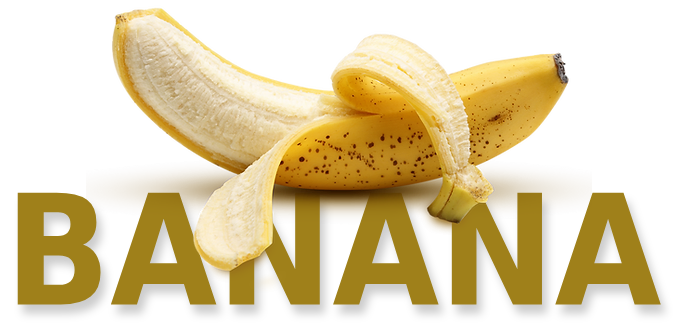
<style>
.page{position:relative;width:685px;height:335px;background:#ffffff}
.page>*{position:absolute;margin:0}
.t1{font:153.3px "DejaVuSansCondensed-Bold";color:#9f801a}
</style>
<div class="page">
<p class="t1" style="left:17px;top:192px;width:644px;height:113px">BANANA</p>
</div>
